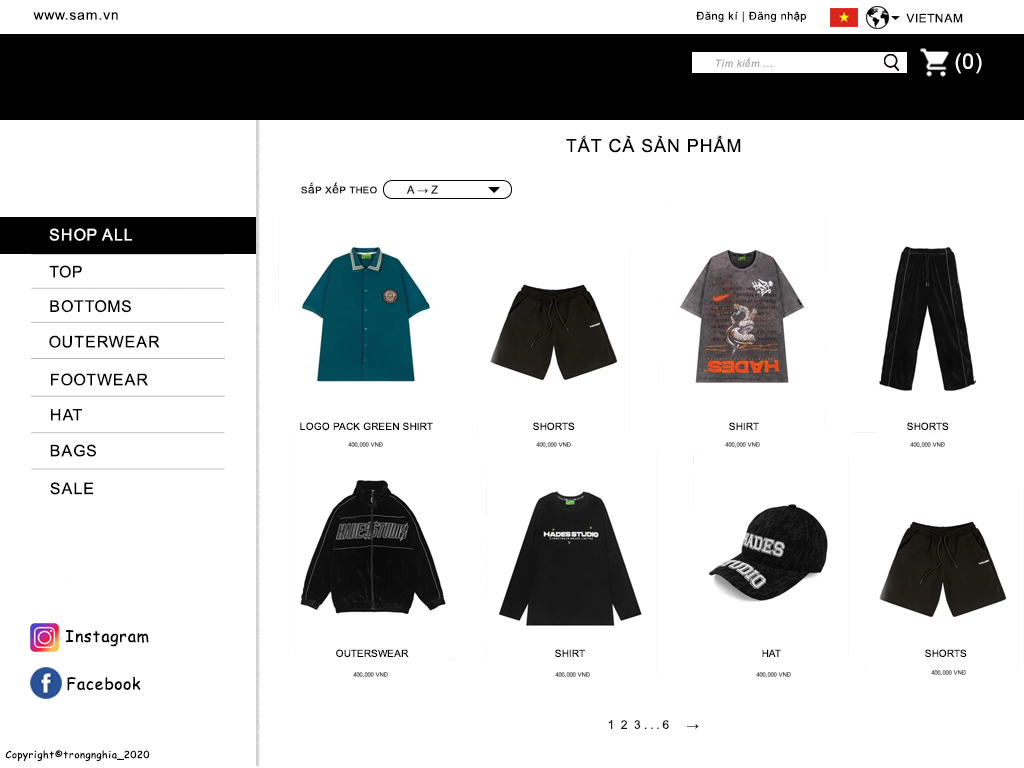
<style>
.page{position:relative;width:1024px;height:768px;background:#ffffff}
.page>*{position:absolute;margin:0}
.t1{font:14px "ArialMT";letter-spacing:0.05em;color:#000000}
.t2{font:11px "ArialMT";letter-spacing:0.05em;color:#000000}
.t3{font:12px "ArialMT";letter-spacing:0.05em;color:#000000}
.t4{font:21px "ArialMT";letter-spacing:0.05em;color:#ffffff}
.t5{font:10px "Arial-ItalicMT";letter-spacing:0.05em;color:#a7a7a7}
.t6{font:18px "ArialMT";letter-spacing:0.05em;color:#000000}
.t7{font:12px "ArialMT";letter-spacing:0.005em;color:#181717;font-variant:small-caps}
.t8{font:11px "ArialMT";letter-spacing:0.005em;color:#181717;font-variant:small-caps}
.t9{font:16px "ArialMT";letter-spacing:0.05em;color:#fefefe}
.t10{font:16px "ArialMT";letter-spacing:0.05em;color:#000000}
.t11{font:10px "ArialMT";letter-spacing:0.005em;color:#000000;font-variant:small-caps}
.t12{font:6px "ArialMT";letter-spacing:0.005em;color:#4d4b4b;font-variant:small-caps}
.t13{font:16px "ComicSansMS";letter-spacing:0.05em;color:#000000}
.t14{font:10px "ComicSansMS";letter-spacing:0.05em;color:#000000}
</style>
<div class="page">
<p class="t1" style="left:33px;top:12px;width:85px;height:8px">www.sam.vn</p>
<p class="t2" style="left:696px;top:11px;width:110px;height:12px">Đăng kí | Đăng nhập</p>
<p class="t3" style="left:906px;top:13px;width:57px;height:10px">VIETNAM</p>
<p class="t4" style="left:955px;top:53px;width:27px;height:21px">(0)</p>
<p class="t5" style="left:715px;top:57px;width:58px;height:10px">Tìm kiếm ...</p>
<p class="t6" style="left:566px;top:135px;width:175px;height:18px">TẤT CẢ SẢN PHẨM</p>
<p class="t7" style="left:301px;top:182px;width:76px;height:12px">sắp xếp theo</p>
<p class="t8" style="left:406px;top:185px;width:32px;height:9px">A → Z</p>
<p class="t9" style="left:49px;top:228px;width:83px;height:13px">SHOP ALL</p>
<p class="t10" style="left:49px;top:265px;width:33px;height:13px">TOP</p>
<p class="t10" style="left:50px;top:300px;width:81px;height:13px">BOTTOMS</p>
<p class="t10" style="left:49px;top:335px;width:111px;height:13px">OUTERWEAR</p>
<p class="t10" style="left:51px;top:373px;width:97px;height:13px">FOOTWEAR</p>
<p class="t10" style="left:51px;top:409px;width:31px;height:12px">HAT</p>
<p class="t11" style="left:300px;top:422px;width:133px;height:9px">LOGO PACK GREEN SHIRT</p>
<p class="t11" style="left:533px;top:422px;width:42px;height:9px">SHORTS</p>
<p class="t11" style="left:729px;top:422px;width:30px;height:9px">SHIRT</p>
<p class="t11" style="left:907px;top:422px;width:42px;height:9px">SHORTS</p>
<p class="t10" style="left:50px;top:444px;width:46px;height:13px">BAGS</p>
<p class="t12" style="left:348px;top:442px;width:35px;height:6px">400,000 VNĐ</p>
<p class="t12" style="left:536px;top:442px;width:35px;height:6px">400,000 VNĐ</p>
<p class="t12" style="left:725px;top:442px;width:35px;height:6px">400,000 VNĐ</p>
<p class="t12" style="left:910px;top:442px;width:35px;height:6px">400,000 VNĐ</p>
<p class="t10" style="left:50px;top:482px;width:44px;height:13px">SALE</p>
<p class="t13" style="left:65px;top:630px;width:84px;height:17px">Instagram</p>
<p class="t11" style="left:336px;top:649px;width:73px;height:9px">OUTERSWEAR</p>
<p class="t11" style="left:555px;top:649px;width:30px;height:9px">SHIRT</p>
<p class="t11" style="left:762px;top:649px;width:19px;height:8px">HAT</p>
<p class="t11" style="left:925px;top:649px;width:42px;height:9px">SHORTS</p>
<p class="t13" style="left:67px;top:676px;width:74px;height:15px">Facebook</p>
<p class="t12" style="left:353px;top:672px;width:35px;height:6px">400,000 VNĐ</p>
<p class="t12" style="left:555px;top:672px;width:35px;height:6px">400,000 VNĐ</p>
<p class="t12" style="left:756px;top:672px;width:35px;height:6px">400,000 VNĐ</p>
<p class="t12" style="left:931px;top:670px;width:35px;height:6px">400,000 VNĐ</p>
<p class="t7" style="left:608px;top:720px;width:61px;height:9px">1  2  3 . . . 6</p>
<p class="t7" style="left:687px;top:724px;width:12px;height:5px">→</p>
<p class="t14" style="left:5px;top:750px;width:145px;height:12px">Copyright©trongnghia_2020</p>
</div>
